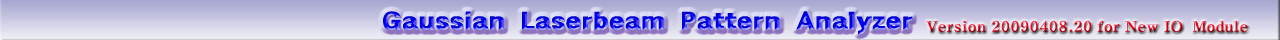
<style>
.page{position:relative;width:1280px;height:40px}
.page>*{position:absolute;margin:0}
.t1{font:24px "GothicXB-HM";scale:1.25 1}
.t2{font:14.4px "H2mjrE"}
</style>
<div class="page">
<p class="t1" style="left:383px;top:11px;width:530px;height:24px">Gaussian Laserbeam Pattern Analyzer</p>
<p class="t2" style="left:926px;top:20px;width:322px;height:12px">Version 20090408.20 for New IO  Module</p>
</div>
